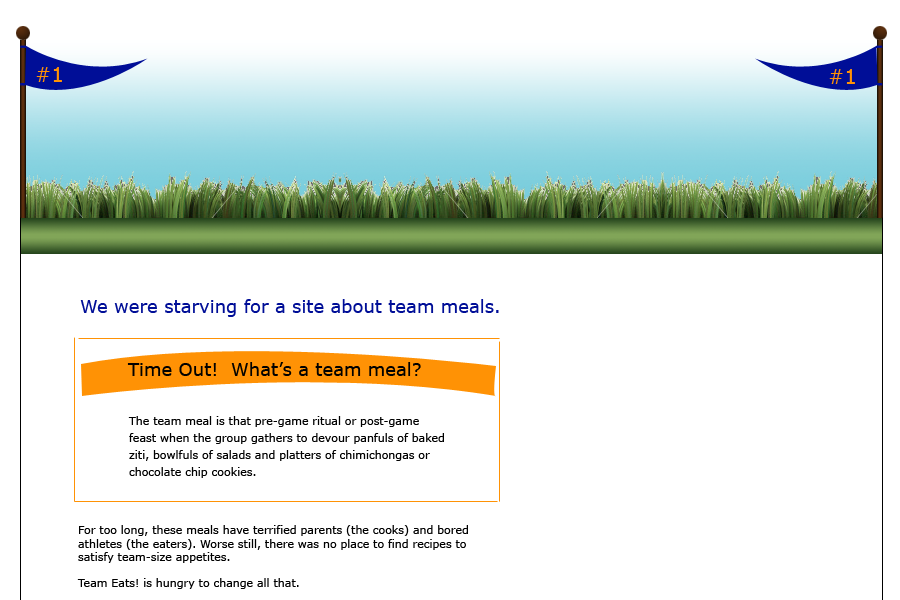
<style>
.page{position:relative;width:900px;height:600px;background:#ffffff}
.page>*{position:absolute;margin:0}
.t1{font:20px "Verdana";color:#ff9205}
.t2{font:18px "Verdana";color:#000e97}
.t3{font:18px "Verdana";color:#010100}
.t4{font:11px/17px "Verdana";color:#000000}
.t5{font:11px "Verdana";color:#000000}
</style>
<div class="page">
<p class="t1" style="left:36px;top:67px;width:26px;height:15px">#1</p>
<p class="t1" style="left:829px;top:69px;width:26px;height:15px">#1</p>
<p class="t2" style="left:80px;top:299px;width:419px;height:18px">We were starving for a site about team meals.</p>
<p class="t3" style="left:127px;top:362px;width:294px;height:14px">Time Out!  What’s a team meal?</p>
<p class="t4" style="left:128px;top:416px;width:316px;height:62px">The team meal is that pre-game ritual or post-game feast when the group gathers to devour panfuls of baked ziti, bowlfuls of salads and platters of chimichongas or chocolate chip cookies.</p>
<p class="t5" style="left:77px;top:525px;width:391px;height:64px">For too long, these meals have terrified parents (the cooks) and bored athletes (the eaters). Worse still, there was no place to find recipes to satisfy team-size appetites. <br><br>Team Eats! is hungry to change all that.<br><br>We’re the clubhouse for finding and sharing scrumptious recipes all proven to please kids and dazzle parents. Whether your team is Football, French Club or Field Hockey -- PeeWee or Adult League -- you’ll find the right chow (and the know-how to prepare it) here. <br><br>You can also share your team's most treasured recipes. So grab your mouse and join our team!</p>
</div>
